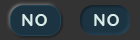
<style>
.page{position:relative;width:140px;height:40px;background:#333333}
.page>*{position:absolute;margin:0}
.t1{font:16.7px "#9Slide03QuicksandBold-Bold";letter-spacing:0.075em;color:#d8ece9;text-transform:uppercase}
</style>
<div class="page">
<p class="t1" style="left:22px;top:14px;width:25px;height:12px">no</p>
<p class="t1" style="left:94px;top:14px;width:25px;height:12px">no</p>
</div>
